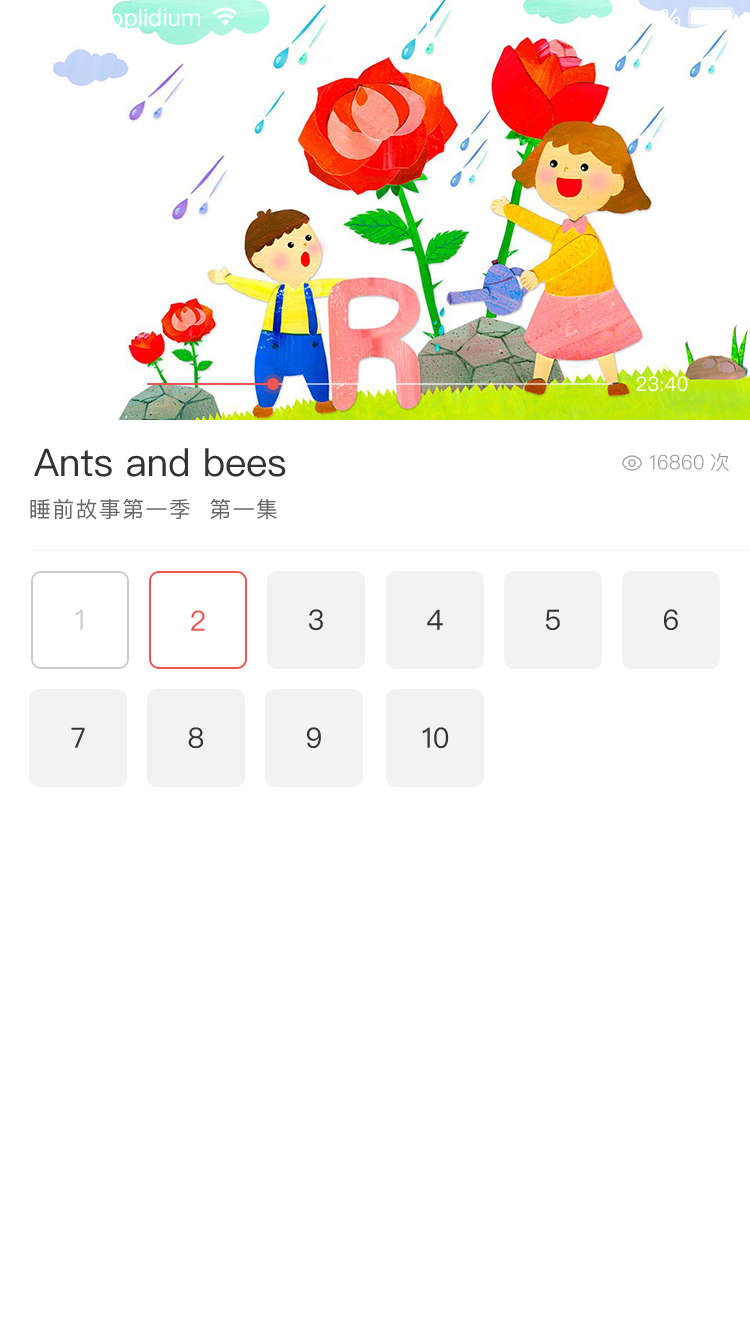
<style>
.page{position:relative;width:750px;height:1334px;background:#ffffff}
.page>*{position:absolute;margin:0}
.t1{font:24px "HelveticaNeueLTStd-Roman";color:#ffffff}
.t2{font:20px "PingFangSC-Regular";color:#ffffff}
.t3{font:38px "PingFangSC-Regular";color:#333333}
.t4{font:20px "PingFangSC-Light";color:#999999}
.t5{font:22px "PingFangSC-Regular";letter-spacing:0.06em;color:#666666}
.t6{font:28px "PingFangSC-Regular";color:#cccccc}
.t7{font:28px "PingFangSC-Regular";color:#ea5851}
.t8{font:28px "PingFangSC-Regular";color:#333333}
</style>
<div class="page">
<p class="t1" style="left:93px;top:8px;width:107px;height:23px">Applidium</p>
<p class="t2" style="left:636px;top:376px;width:52px;height:16px">23:40</p>
<p class="t3" style="left:34px;top:448px;width:252px;height:29px">Ants and bees</p>
<p class="t4" style="left:650px;top:452px;width:79px;height:20px">16860次</p>
<p class="t5" style="left:30px;top:498px;width:247px;height:22px">睡前故事第一季  第一集</p>
<p class="t6" style="left:75px;top:609px;width:8px;height:21px">1</p>
<p class="t7" style="left:191px;top:610px;width:14px;height:21px">2</p>
<p class="t8" style="left:309px;top:609px;width:14px;height:22px">3</p>
<p class="t8" style="left:427px;top:609px;width:16px;height:21px">4</p>
<p class="t8" style="left:546px;top:609px;width:14px;height:22px">5</p>
<p class="t8" style="left:664px;top:609px;width:14px;height:22px">6</p>
<p class="t8" style="left:71px;top:727px;width:14px;height:21px">7</p>
<p class="t8" style="left:188px;top:727px;width:15px;height:22px">8</p>
<p class="t8" style="left:307px;top:727px;width:14px;height:22px">9</p>
<p class="t8" style="left:422px;top:727px;width:27px;height:22px">10</p>
</div>
